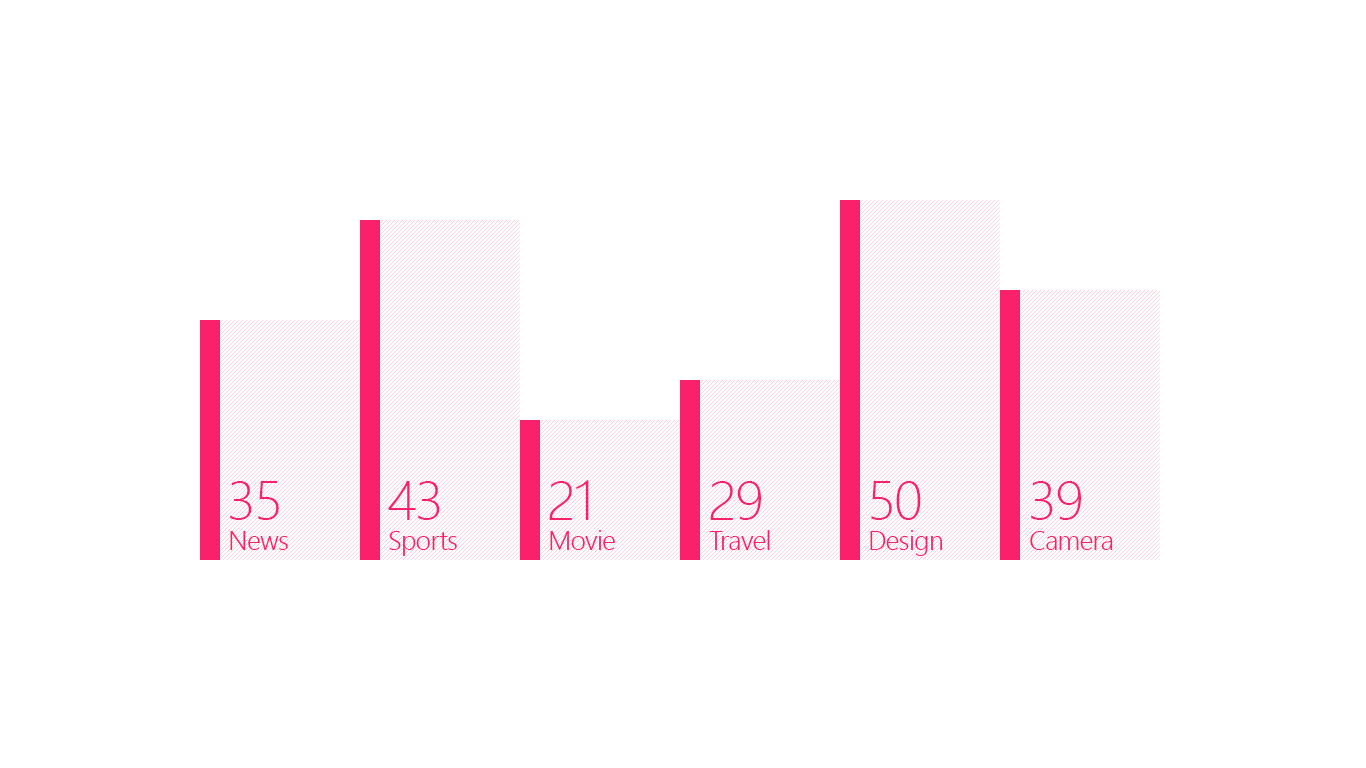
<style>
.page{position:relative;width:1366px;height:768px;background:#ffffff}
.page>*{position:absolute;margin:0}
.t1{font:56px "SegoeUI-Light";letter-spacing:-0.025em;color:#f8216a}
.t2{font:26.7px "SegoeUI-Semilight";letter-spacing:-0.025em;color:#f8216a}
</style>
<div class="page">
<p class="t1" style="left:230px;top:481px;width:49px;height:39px">35</p>
<p class="t1" style="left:388px;top:481px;width:52px;height:39px">43</p>
<p class="t1" style="left:549px;top:480px;width:40px;height:40px">21</p>
<p class="t1" style="left:710px;top:481px;width:51px;height:39px">29</p>
<p class="t1" style="left:871px;top:481px;width:50px;height:39px">50</p>
<p class="t1" style="left:1031px;top:481px;width:50px;height:39px">39</p>
<p class="t2" style="left:230px;top:531px;width:58px;height:19px">News</p>
<p class="t2" style="left:389px;top:531px;width:68px;height:25px">Sports</p>
<p class="t2" style="left:550px;top:530px;width:65px;height:20px">Movie</p>
<p class="t2" style="left:709px;top:530px;width:61px;height:20px">Travel</p>
<p class="t2" style="left:870px;top:530px;width:73px;height:26px">Design</p>
<p class="t2" style="left:1030px;top:531px;width:83px;height:19px">Camera</p>
</div>
